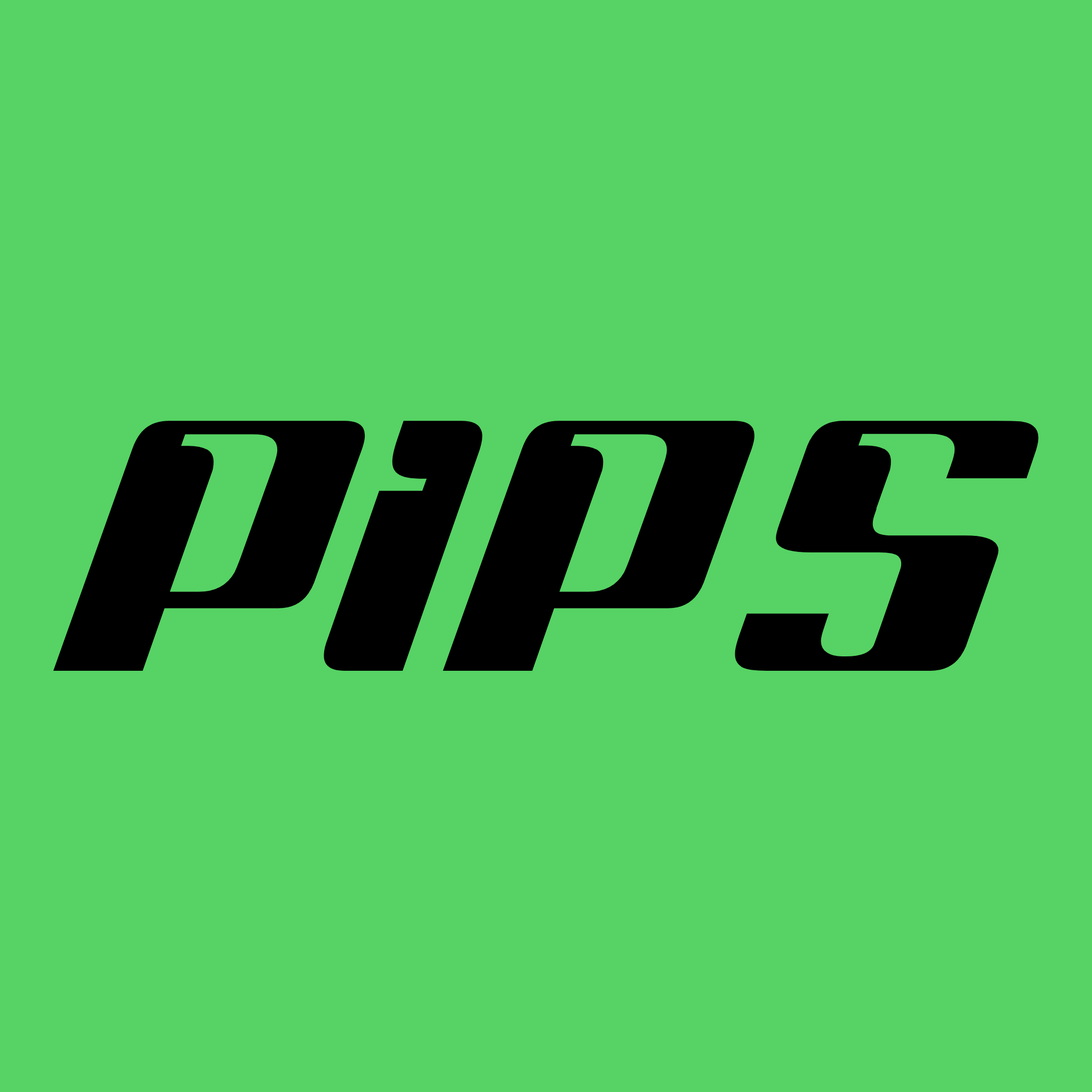
<style>
.page{position:relative;width:1092px;height:1092px;background:#56d364}
.page>*{position:absolute;margin:0}
.t1{font:639.8px "Magenta";color:#000000}
</style>
<div class="page">
<p class="t1" style="left:53px;top:421px;width:986px;height:250px">PIPS</p>
</div>
